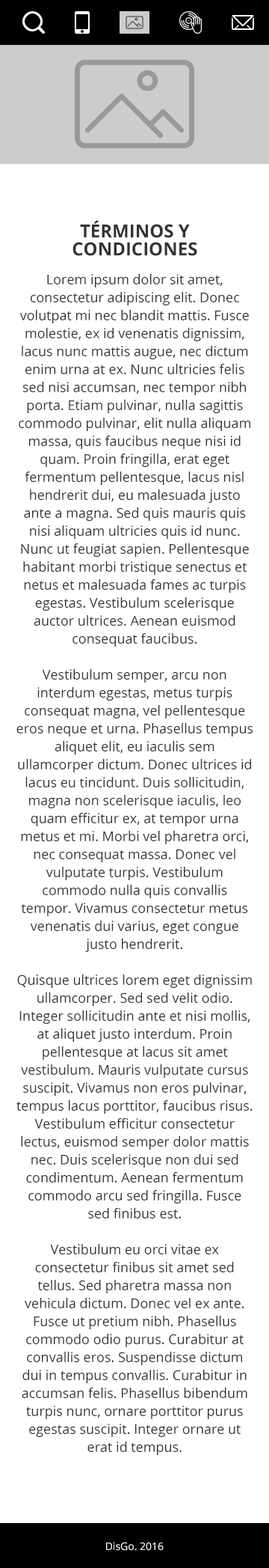
<style>
.page{position:relative;width:269px;height:1568px;background:#ffffff}
.page>*{position:absolute;margin:0}
.t1{font:18px/18px "OpenSans-Bold";color:#333333;text-transform:uppercase}
.t2{font:13.5px/18px "OpenSans";color:#333333}
.t3{font:10.5px "OpenSans";color:#ffffff}
</style>
<div class="page">
<p class="t1" style="left:73px;top:221px;width:125px;height:35px;text-align:center">Términos y Condiciones</p>
<p class="t2" style="left:16px;top:274px;width:238px;height:1181px;text-align:center">Lorem ipsum dolor sit amet, consectetur adipiscing elit. Donec volutpat mi nec blandit mattis. Fusce molestie, ex id venenatis dignissim, lacus nunc mattis augue, nec dictum enim urna at ex. Nunc ultricies felis sed nisi accumsan, nec tempor nibh porta. Etiam pulvinar, nulla sagittis commodo pulvinar, elit nulla aliquam massa, quis faucibus neque nisi id quam. Proin fringilla, erat eget fermentum pellentesque, lacus nisl hendrerit dui, eu malesuada justo ante a magna. Sed quis mauris quis nisi aliquam ultricies quis id nunc. Nunc ut feugiat sapien. Pellentesque habitant morbi tristique senectus et netus et malesuada fames ac turpis egestas. Vestibulum scelerisque auctor ultrices. Aenean euismod consequat faucibus.<br><br>Vestibulum semper, arcu non interdum egestas, metus turpis consequat magna, vel pellentesque eros neque et urna. Phasellus tempus aliquet elit, eu iaculis sem ullamcorper dictum. Donec ultrices id lacus eu tincidunt. Duis sollicitudin, magna non scelerisque iaculis, leo quam efficitur ex, at tempor urna metus et mi. Morbi vel pharetra orci, nec consequat massa. Donec vel vulputate turpis. Vestibulum commodo nulla quis convallis tempor. Vivamus consectetur metus venenatis dui varius, eget congue justo hendrerit.<br><br>Quisque ultrices lorem eget dignissim ullamcorper. Sed sed velit odio. Integer sollicitudin ante et nisi mollis, at aliquet justo interdum. Proin pellentesque at lacus sit amet vestibulum. Mauris vulputate cursus suscipit. Vivamus non eros pulvinar, tempus lacus porttitor, faucibus risus. Vestibulum efficitur consectetur lectus, euismod semper dolor mattis nec. Duis scelerisque non dui sed condimentum. Aenean fermentum commodo arcu sed fringilla. Fusce sed finibus est.<br><br>Vestibulum eu orci vitae ex consectetur finibus sit amet sed tellus. Sed pharetra massa non vehicula dictum. Donec vel ex ante. Fusce ut pretium nibh. Phasellus commodo odio purus. Curabitur at convallis eros. Suspendisse dictum dui in tempus convallis. Curabitur in accumsan felis. Phasellus bibendum turpis nunc, ornare porttitor purus egestas suscipit. Integer ornare ut erat id tempus.</p>
<p class="t3" style="left:106px;top:1542px;width:58px;height:9px">DisGo. 2016</p>
</div>
